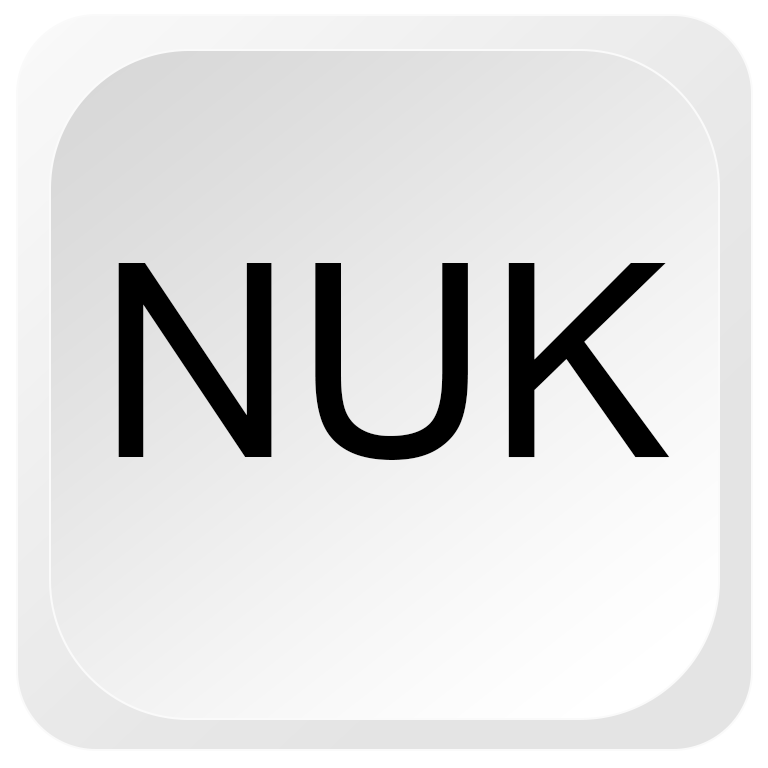
<style>
.page{position:relative;width:768px;height:768px}
.page>*{position:absolute;margin:0}
.t1{font:271px "ArialMT";color:#000000}
</style>
<div class="page">
<p class="t1" style="left:118px;top:263px;width:552px;height:197px">NUK</p>
</div>
